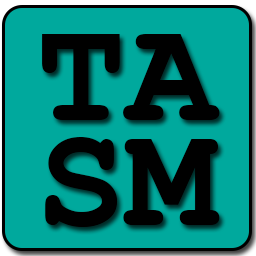
<style>
.page{position:relative;width:256px;height:256px;background:#00a99d}
.page>*{position:absolute;margin:0}
.t1{font:150px "CourierNewPS-BoldMT";color:#000000}
</style>
<div class="page">
<p class="t1" style="left:42px;top:34px;width:178px;height:86px">TA</p>
<p class="t1" style="left:45px;top:137px;width:175px;height:90px">SM</p>
</div>
